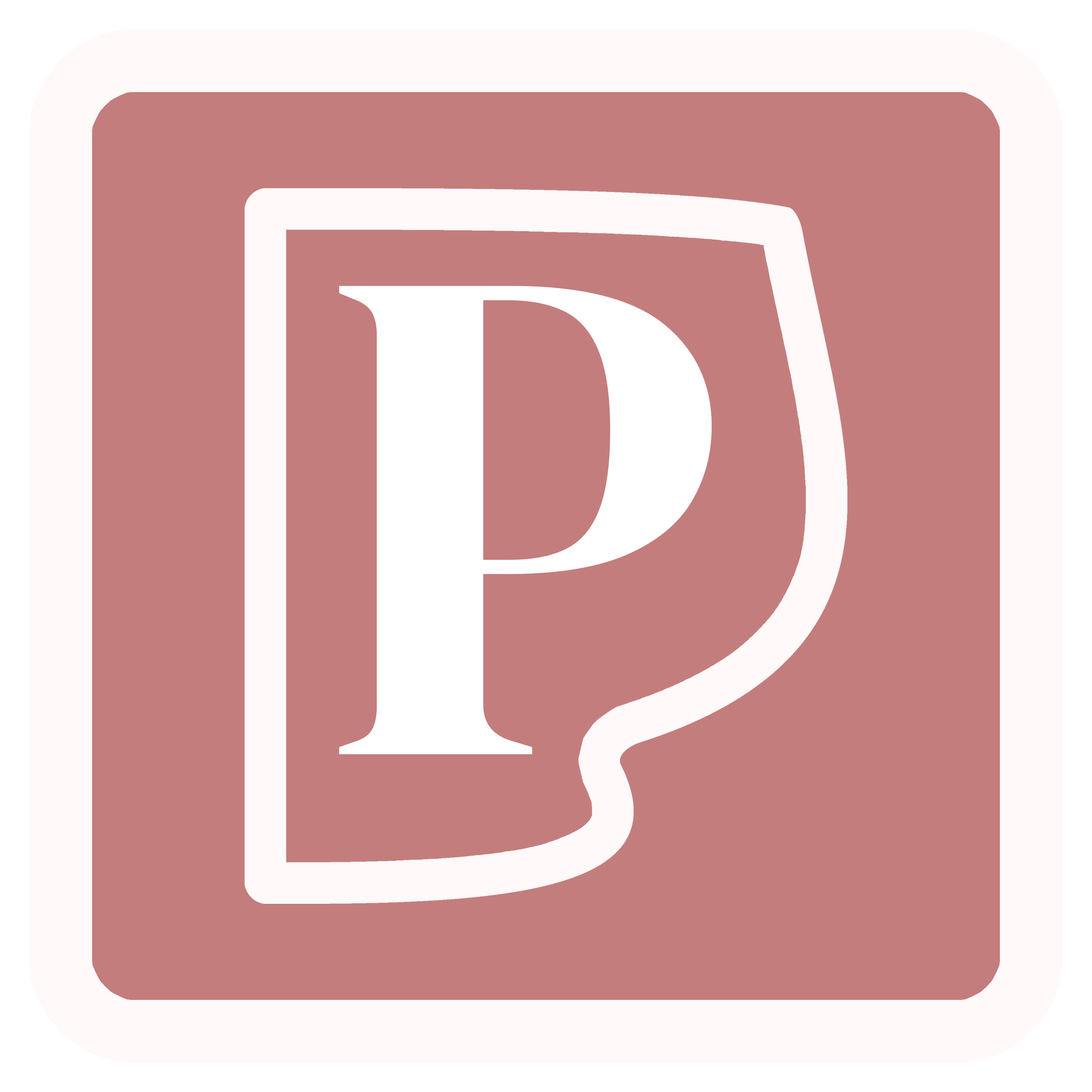
<style>
.page{position:relative;width:1092px;height:1092px;background:#c47d7d}
.page>*{position:absolute;margin:0}
.t1{font:709.4px "DMSerifDisplay-Regular";color:#ffffff}
</style>
<div class="page">
<p class="t1" style="left:339px;top:286px;width:373px;height:468px">P</p>
</div>
